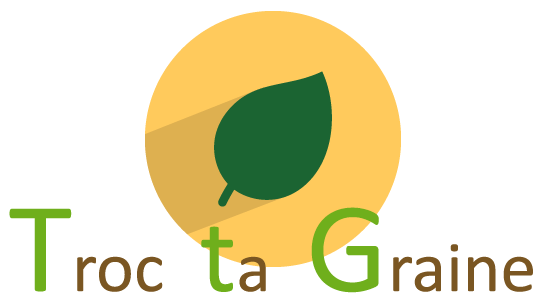
<style>
.page{position:relative;width:552px;height:306px;background:#ffffff}
.page>*{position:absolute;margin:0}
.t1{font:72px "Calibri";color:#7a5622}
.t2{font:130px "Calibri";color:#6faf1c}
.t3{font:110px "Calibri";color:#6faf1c}
</style>
<div class="page">
<p class="t1" style="left:9px;top:207px;width:524px;height:86px"><span class="t2">T</span>roc <span class="t3">t</span>a <span class="t2">G</span>raine</p>
</div>
